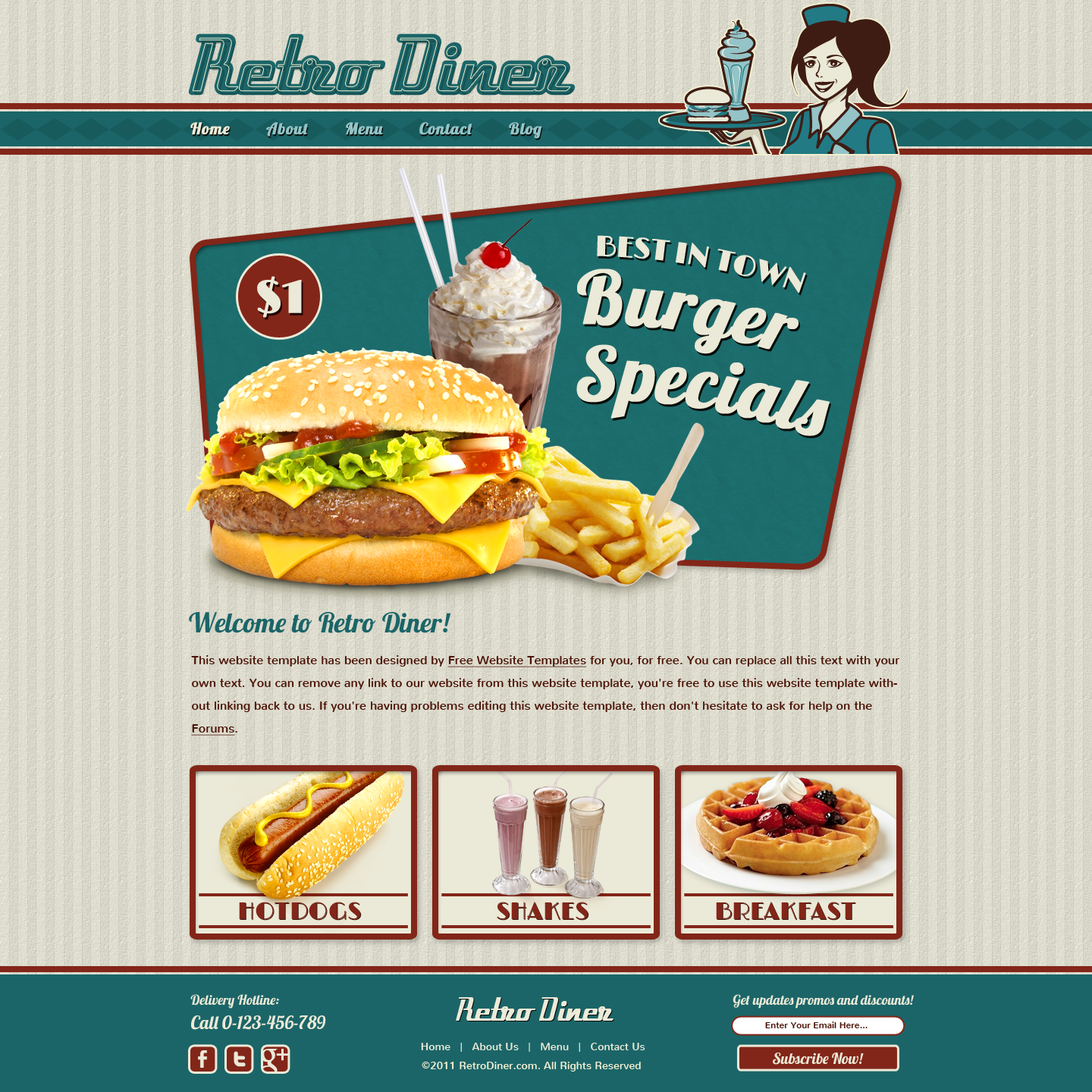
<style>
.page{position:relative;width:1092px;height:1092px}
.page>*{position:absolute;margin:0}
.t1{font:94px "Velocette";color:#1b6568;font-weight:bold}
.t2{font:15.9px "Lobster";letter-spacing:0.04em;color:#94c4c7;font-weight:bold}
.t3{font:15.9px "Lobster";letter-spacing:0.04em;color:#ebe9d7;font-weight:bold}
.t4{font:29.1px "Limelight";letter-spacing:-0.025em;color:#ebe9d7;font-weight:bold}
.t5{font:73.1px "Lobster";color:#ebe9d7;font-weight:bold}
.t6{font:46.5px "Limelight";color:#ebe9d7;font-weight:bold}
.t7{font:27.3px "Lobster";color:#1b6568}
.t8{font:12.1px/22.7px "Nunito-Regular";color:#4c1407}
.t9{font:12.1px/22.7px "Nunito-Regular";color:#4c1407;text-decoration:underline}
.t10{font:24.3px "Limelight";color:#822619;text-transform:uppercase}
.t11{font:18.2px/24.3px "Lobster";color:#ebe9d7}
.t12{font:13.6px/24.3px "Lobster";color:#ebe9d7}
.t13{font:38.7px "Velocette";color:#ecead9;font-weight:bold}
.t14{font:13.6px "Lobster";color:#ebe9d7}
.t15{font:9.1px "Nunito-Regular";color:#4c1407}
.t16{font:10.6px "Nunito-Regular";color:#ebe9d7}
.t17{font:10.6px "Nunito-Regular";color:#f2efd1}
.t18{font:15.2px "Lobster";color:#ebe9d7}
</style>
<div class="page">
<p class="t1" style="left:191px;top:36px;width:382px;height:57px">Retro Diner</p>
<p class="t2" style="left:190px;top:122px;width:352px;height:17px"><span class="t3">Home</span>        About        Menu        Contact        Blog</p>
<p class="t4" style="left:597px;top:235px;width:209px;height:58px;rotate:29deg">BEST IN TOWN</p>
<p class="t5" style="left:577px;top:268px;width:222px;height:86px;rotate:29deg">Burger</p>
<p class="t6" style="left:257px;top:276px;width:45px;height:42px">$1</p>
<p class="t5" style="left:576px;top:344px;width:254px;height:92px;rotate:29deg">Specials</p>
<p class="t7" style="left:189px;top:612px;width:262px;height:21px">Welcome to Retro Diner!</p>
<p class="t8" style="left:191px;top:655px;width:708px;height:81px">This website template has been designed by <span class="t9">Free Website Templates</span> for you, for free. You can replace all this text with your own text. You can remove any link to our website from this website template, you're free to use this website template without linking back to us. If you're having problems editing this website template, then don't hesitate to ask for help on the <span class="t9">Forums</span>.</p>
<p class="t10" style="left:239px;top:902px;width:122px;height:18px">Hotdogs</p>
<p class="t10" style="left:497px;top:902px;width:91px;height:18px">Shakes</p>
<p class="t10" style="left:716px;top:902px;width:139px;height:18px">Breakfast</p>
<p class="t11" style="left:190px;top:994px;width:136px;height:36px"><span class="t12">Delivery Hotline:<br></span>Call 0-123-456-789</p>
<p class="t13" style="left:456px;top:997px;width:157px;height:24px">Retro Diner</p>
<p class="t14" style="left:733px;top:994px;width:181px;height:15px">Get updates promos and discounts!</p>
<p class="t15" style="left:765px;top:1021px;width:103px;height:7px">Enter Your Email Here...</p>
<p class="t16" style="left:421px;top:1043px;width:224px;height:9px">Home   |   About Us   |   Menu   |   Contact Us</p>
<p class="t17" style="left:422px;top:1062px;width:219px;height:10px">©2011 RetroDiner.com. All Rights Reserved</p>
<p class="t18" style="left:773px;top:1053px;width:91px;height:12px">Subscribe Now!</p>
</div>
